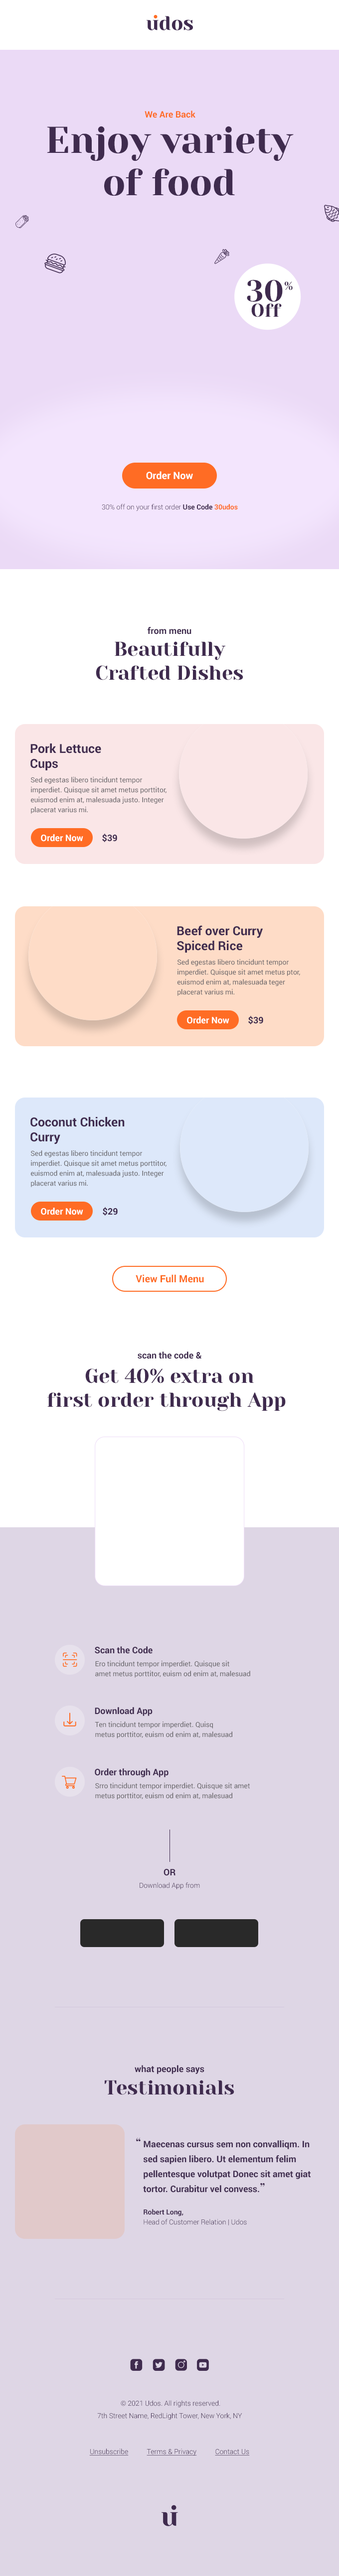
<style>
.page{position:relative;width:339px;height:2576px;background:#ded6e5}
.page>*{position:absolute;margin:0}
.t1{font:9px "Roboto-Bold";color:#ff6c24}
.t2{font:37.3px/42.3px "YesevaOne";color:#3f2b4e}
.t3{font:29.9px "YesevaOne";color:#3f2b4e}
.t4{font:11.4px "YesevaOne";color:#3f2b4e}
.t5{font:18.5px "YesevaOne";color:#3f2b4e}
.t6{font:10px "Roboto-Bold";color:#ffffff}
.t7{font:7px "Roboto-Light";color:#3f2b4e}
.t8{font:7px "Roboto-Bold";color:#3f2b4e}
.t9{font:7px "Roboto-Bold";color:#ff6c24}
.t10{font:9px "Roboto-Bold";color:#3f2b4e}
.t11{font:19.9px "YesevaOne";color:#3f2b4e}
.t12{font:12.4px/14.9px "Roboto-Bold";color:#3f2b4e}
.t13{font:7px/10px "Roboto-Regular";color:#646266}
.t14{font:9px "Roboto-Bold";color:#ffffff}
.t15{font:10px "Roboto-Bold";color:#ff6c24}
.t16{font:12.4px "YesevaOne";color:#3f2b4e}
.t17{font:9px/14.9px "Roboto-Bold";color:#3f2b4e}
.t18{font:12.4px/14.9px "YesevaOne";color:#3f2b4e}
.t19{font:7px/10px "Roboto-Light";color:#3f2b4e}
.t20{font:7px/10px "Roboto-Bold";color:#3f2b4e}
.t21{font:7px/12.4px "Roboto-Light";color:#3f2b4e}
.t22{font:7px "Roboto-Light";color:#3f2b4e;text-decoration:underline}
</style>
<div class="page">
<p class="t1" style="left:144px;top:111px;width:51px;height:7px">We Are Back</p>
<p class="t2" style="left:47px;top:126px;width:246px;height:70px;text-align:center">Enjoy variety<br>of food</p>
<p class="t3" style="left:246px;top:280px;width:36px;height:22px">30</p>
<p class="t4" style="left:284px;top:281px;width:8px;height:9px">%</p>
<p class="t5" style="left:251px;top:303px;width:30px;height:14px">Off</p>
<p class="t6" style="left:146px;top:471px;width:47px;height:9px">Order Now</p>
<p class="t7" style="left:102px;top:504px;width:136px;height:7px">30% off on your first order <span class="t8">Use Code </span><span class="t9">30udos</span></p>
<p class="t10" style="left:147px;top:627px;width:44px;height:7px">from menu</p>
<p class="t11" style="left:96px;top:641px;width:147px;height:39px;text-align:center">Beautifully<br>Crafted Dishes</p>
<p class="t12" style="left:30px;top:743px;width:71px;height:27px">Pork Lettuce<br>Cups</p>
<p class="t13" style="left:31px;top:777px;width:135px;height:37px">Sed egestas libero tincidunt tempor<br>imperdiet. Quisque sit amet metus porttitor, euismod enim at, malesuada justo. Integer<br>placerat varius mi.</p>
<p class="t10" style="left:102px;top:834px;width:15px;height:8px">$39</p>
<p class="t14" style="left:41px;top:834px;width:42px;height:8px">Order Now</p>
<p class="t12" style="left:177px;top:925px;width:86px;height:28px">Beef over Curry<br>Spiced Rice</p>
<p class="t13" style="left:177px;top:959px;width:123px;height:37px">Sed egestas libero tincidunt tempor<br>imperdiet. Quisque sit amet metus ptor, <br>euismod enim at, malesuada teger<br>placerat varius mi.</p>
<p class="t14" style="left:187px;top:1016px;width:42px;height:8px">Order Now</p>
<p class="t10" style="left:248px;top:1016px;width:15px;height:8px">$39</p>
<p class="t12" style="left:30px;top:1117px;width:94px;height:27px">Coconut Chicken<br>Curry</p>
<p class="t13" style="left:31px;top:1150px;width:135px;height:37px">Sed egestas libero tincidunt tempor<br>imperdiet. Quisque sit amet metus porttitor, euismod enim at, malesuada justo. Integer<br>placerat varius mi.</p>
<p class="t14" style="left:41px;top:1208px;width:42px;height:7px">Order Now</p>
<p class="t10" style="left:103px;top:1207px;width:15px;height:9px">$29</p>
<p class="t15" style="left:135px;top:1274px;width:69px;height:9px">View Full Menu</p>
<p class="t10" style="left:137px;top:1351px;width:65px;height:8px">scan the code &amp;</p>
<p class="t11" style="left:47px;top:1368px;width:238px;height:43px;text-align:center">Get 40% extra on<br>first order through App</p>
<p class="t10" style="left:95px;top:1646px;width:57px;height:8px">Scan the Code</p>
<p class="t13" style="left:95px;top:1661px;width:155px;height:17px">Ero tincidunt tempor imperdiet. Quisque sit <br>amet metus porttitor, euism od enim at, malesuad</p>
<p class="t10" style="left:95px;top:1707px;width:57px;height:9px">Download App</p>
<p class="t13" style="left:95px;top:1721px;width:137px;height:17px">Ten tincidunt tempor imperdiet. Quisq<br>metus porttitor, euism od enim at, malesuad</p>
<p class="t10" style="left:95px;top:1768px;width:73px;height:9px">Order through App</p>
<p class="t13" style="left:95px;top:1783px;width:154px;height:17px">Srro tincidunt tempor imperdiet. Quisque sit amet<br>metus porttitor, euism od enim at, malesuad</p>
<p class="t10" style="left:163px;top:1869px;width:12px;height:7px">OR</p>
<p class="t7" style="left:139px;top:1882px;width:61px;height:7px">Download App from</p>
<p class="t10" style="left:134px;top:2065px;width:70px;height:9px">what people says</p>
<p class="t11" style="left:105px;top:2080px;width:129px;height:15px">Testimonials</p>
<p class="t16" style="left:136px;top:2138px;width:4px;height:3px">“</p>
<p class="t17" style="left:143px;top:2140px;width:167px;height:53px">Maecenas cursus sem non convalliqm. In sed sapien libero. Ut elementum felim pellentesque volutpat Donec sit amet giat tortor. Curabitur vel convess.<span class="t18">”</span></p>
<p class="t19" style="left:143px;top:2209px;width:103px;height:16px"><span class="t20">Robert Long,<br></span>Head of Customer Relation | Udos</p>
<p class="t21" style="left:97px;top:2400px;width:145px;height:20px;text-align:center">© 2021 Udos. All rights reserved.<br>7th Street Name, RedLight Tower, New York, NY</p>
<p class="t22" style="left:89px;top:2449px;width:160px;height:6px">Unsubscribe           Terms &amp; Privacy           Contact Us</p>
</div>
